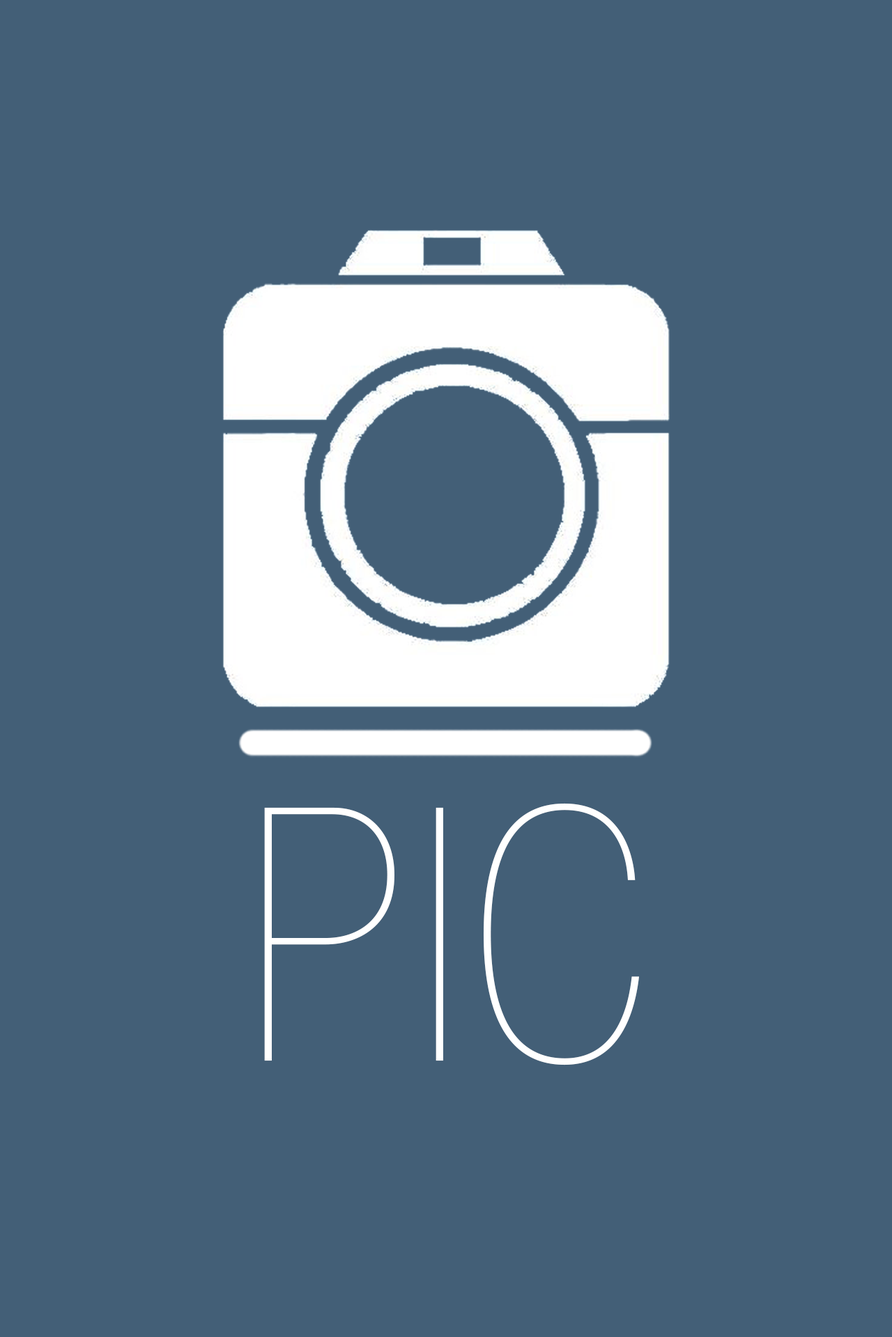
<style>
.page{position:relative;width:892px;height:1337px;background:#435f77}
.page>*{position:absolute;margin:0}
.t1{font:353.9px "HelveticaNeue-UltraLigCond";letter-spacing:0.014em;color:#ffffff}
</style>
<div class="page">
<p class="t1" style="left:264px;top:803px;width:375px;height:263px">PIC</p>
</div>
